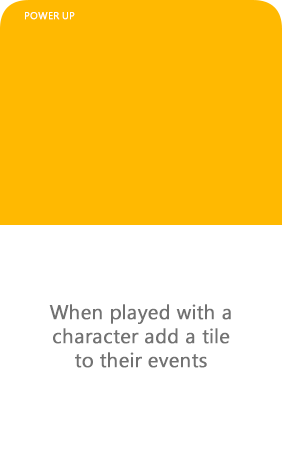
<style>
.page{position:relative;width:282px;height:450px;background:#ffb901}
.page>*{position:absolute;margin:0}
.t1{font:10px "SegoeUI";color:#ffffff;font-weight:bold}
.t2{font:20px/24px "SegoeUI";color:#727272;font-weight:bold}
</style>
<div class="page">
<p class="t1" style="left:25px;top:12px;width:50px;height:8px">POWER UP</p>
<p class="t2" style="left:49px;top:304px;width:182px;height:64px;text-align:center">When played with a<br>character add a tile<br>to their events</p>
</div>
